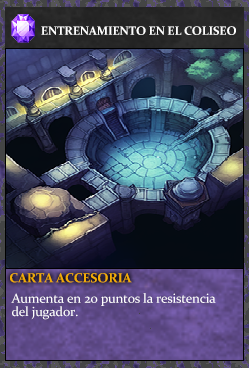
<style>
.page{position:relative;width:249px;height:368px}
.page>*{position:absolute;margin:0}
.t1{font:12px "Constantia-Bold";letter-spacing:-0.02em;color:#ffffff}
.t2{font:13.3px "Constantia-Bold";letter-spacing:-0.02em;color:#f2ac05}
.t3{font:13.3px/13.3px "Constantia";letter-spacing:-0.02em;color:#ffffff}
</style>
<div class="page">
<p class="t1" style="left:41px;top:26px;width:195px;height:9px">ENTRENAMIENTO EN EL COLISEO</p>
<p class="t2" style="left:10px;top:273px;width:122px;height:10px">CARTA ACCESORIA</p>
<p class="t3" style="left:11px;top:293px;width:205px;height:27px">Aumenta en 20 puntos la resistencia<br>del jugador.</p>
</div>
